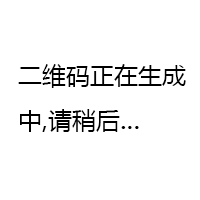
<style>
.page{position:relative;width:200px;height:200px;background:#ffffff}
.page>*{position:absolute;margin:0}
.t1{font:24px "MicrosoftYaHei";color:#000000}
.t2{font:28px "MicrosoftYaHei";color:#000000}
</style>
<div class="page">
<p class="t1" style="left:18px;top:64px;width:168px;height:68px">二维码正在生成<br>中,请稍后<span class="t2">...</span></p>
</div>
